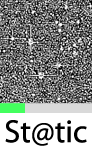
<style>
.page{position:relative;width:92px;height:150px}
.page>*{position:absolute;margin:0}
.t1{font:32.3px "MyriadPro-Regular";color:#000000}
</style>
<div class="page">
<p class="t1" style="left:5px;top:120px;width:82px;height:26px">St@tic</p>
</div>
